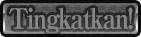
<style>
.page{position:relative;width:141px;height:37px}
.page>*{position:absolute;margin:0}
.t1{font:28px "RyuminPro-ExBold";letter-spacing:-0.08em;color:#878685;scale:0.9 1}
</style>
<div class="page">
<p class="t1" style="left:9px;top:7px;width:124px;height:27px">Tingkatkan!</p>
</div>
